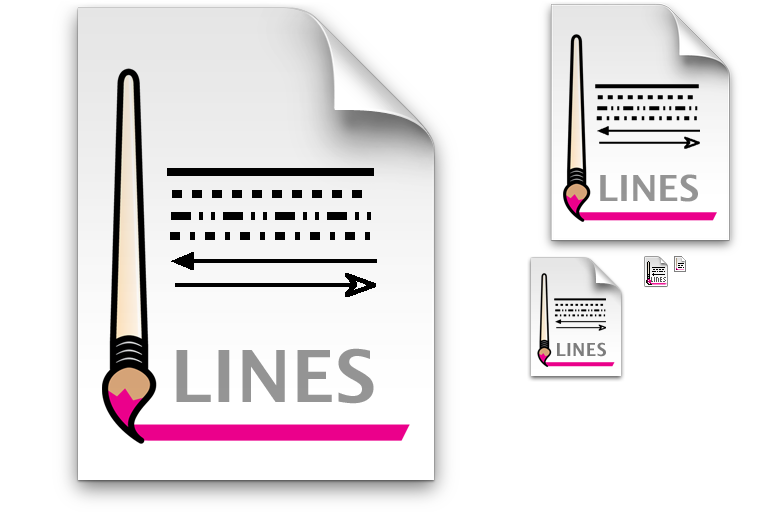
<style>
.page{position:relative;width:768px;height:512px;background:#ffffff}
.page>*{position:absolute;margin:0}
.t1{font:36px "LucidaGrande-Bold";color:#959595}
.t2{font:18px "LucidaGrande-Bold";color:#7d7d7d}
.t3{font:72px "LucidaGrande-Bold";color:#959595}
</style>
<div class="page">
<p class="t1" style="left:600px;top:174px;width:98px;height:28px">LINES</p>
<p class="t2" style="left:557px;top:342px;width:49px;height:15px">LINES</p>
<p class="t3" style="left:176px;top:348px;width:198px;height:56px">LINES</p>
</div>
